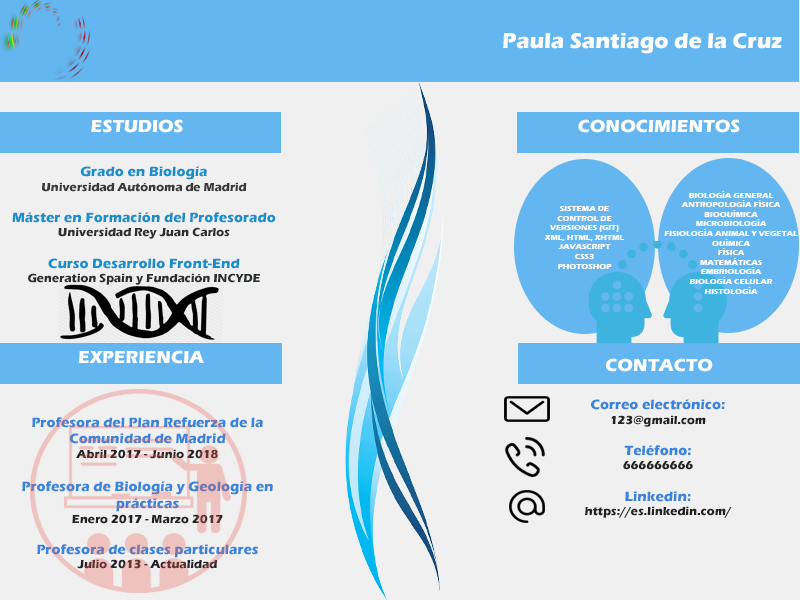
<style>
.page{position:relative;width:800px;height:600px;background:#f0f0f0}
.page>*{position:absolute;margin:0}
.t1{font:22px "ErasITC-Bold";color:#fffefe}
.t2{font:18px "ErasITC-Bold";color:#fffefe}
.t3{font:14px "ErasITC-Bold";color:#1990cd}
.t4{font:12px "ErasITC-Bold";color:#3a3a3a}
.t5{font:12px "ErasITC-Bold";color:#2c3032}
.t6{font:8px "ErasITC-Bold";color:#ffffff}
.t7{font:12px "ErasITC-Bold";color:#0b0a0a}
.t8{font:12px "ErasITC-Bold";color:#212326}
.t9{font:14px "ErasITC-Bold";color:#3a84de}
</style>
<div class="page">
<p class="t1" style="left:503px;top:33px;width:279px;height:21px">Paula Santiago de la Cruz</p>
<p class="t2" style="left:91px;top:119px;width:92px;height:14px">ESTUDIOS</p>
<p class="t2" style="left:578px;top:119px;width:162px;height:14px">CONOCIMIENTOS</p>
<p class="t3" style="left:12px;top:166px;width:264px;height:119px;text-align:center">Grado en Biología<br><span class="t4">Universidad Autónoma de Madrid <br><br></span>Máster en Formación del Profesorado<br><span class="t5">Universidad Rey Juan Carlos<br><br></span>Curso Desarrollo Front-End<br><span class="t5">Generation Spain y Fundación INCYDE</span></p>
<p class="t6" style="left:664px;top:191px;width:134px;height:103px;text-align:center"><span class="t7"> </span>BIOLOGÍA GENERAL<br>ANTROPOLOGÍA FÍSICA<br>BIOQUÍMICA<br>MICROBIOLOGÍA<br>FISIOLOGÍA ANIMAL Y VEGETAL<br>QUÍMICA<br>FÍSICA<br>MATEMÁTICAS<br>EMBRIOLOGÍA<br>BIOLOGÍA CELULAR<br>HISTOLOGÍA</p>
<p class="t6" style="left:544px;top:206px;width:80px;height:63px;text-align:center">SISTEMA DE CONTROL DE VERSIONES (GIT)<br>XML, HTML, XHTML<br>JAVASCRIPT<br>CSS3<br>PHOTOSHOP</p>
<p class="t2" style="left:78px;top:350px;width:126px;height:14px">EXPERIENCIA</p>
<p class="t2" style="left:606px;top:358px;width:107px;height:14px">CONTACTO</p>
<p class="t8" style="left:585px;top:399px;width:147px;height:119px;text-align:center"><span class="t9">Correo electrónico:<br></span>123@gmail.com<br><br><span class="t9">Teléfono:<br></span>666666666<br><br><span class="t9">Linkedin: <br></span>https://es.linkedin.com/</p>
<p class="t9" style="left:22px;top:417px;width:251px;height:152px;text-align:center">Profesora del Plan Refuerza de la Comunidad de Madrid<br><span class="t8">Abril 2017 - Junio 2018<br></span><br>Profesora de Biología y Geología en prácticas<br><span class="t8">Enero 2017 - Marzo 2017<br><br></span>Profesora de clases particulares<br><span class="t8">Julio 2013 - Actualidad</span></p>
</div>
